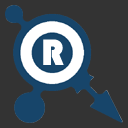
<style>
.page{position:relative;width:128px;height:128px;background:#333333}
.page>*{position:absolute;margin:0}
.t1{font:37.9px "Bauhaus93";color:#ffffff}
</style>
<div class="page">
<p class="t1" style="left:43px;top:39px;width:21px;height:26px">R</p>
</div>
